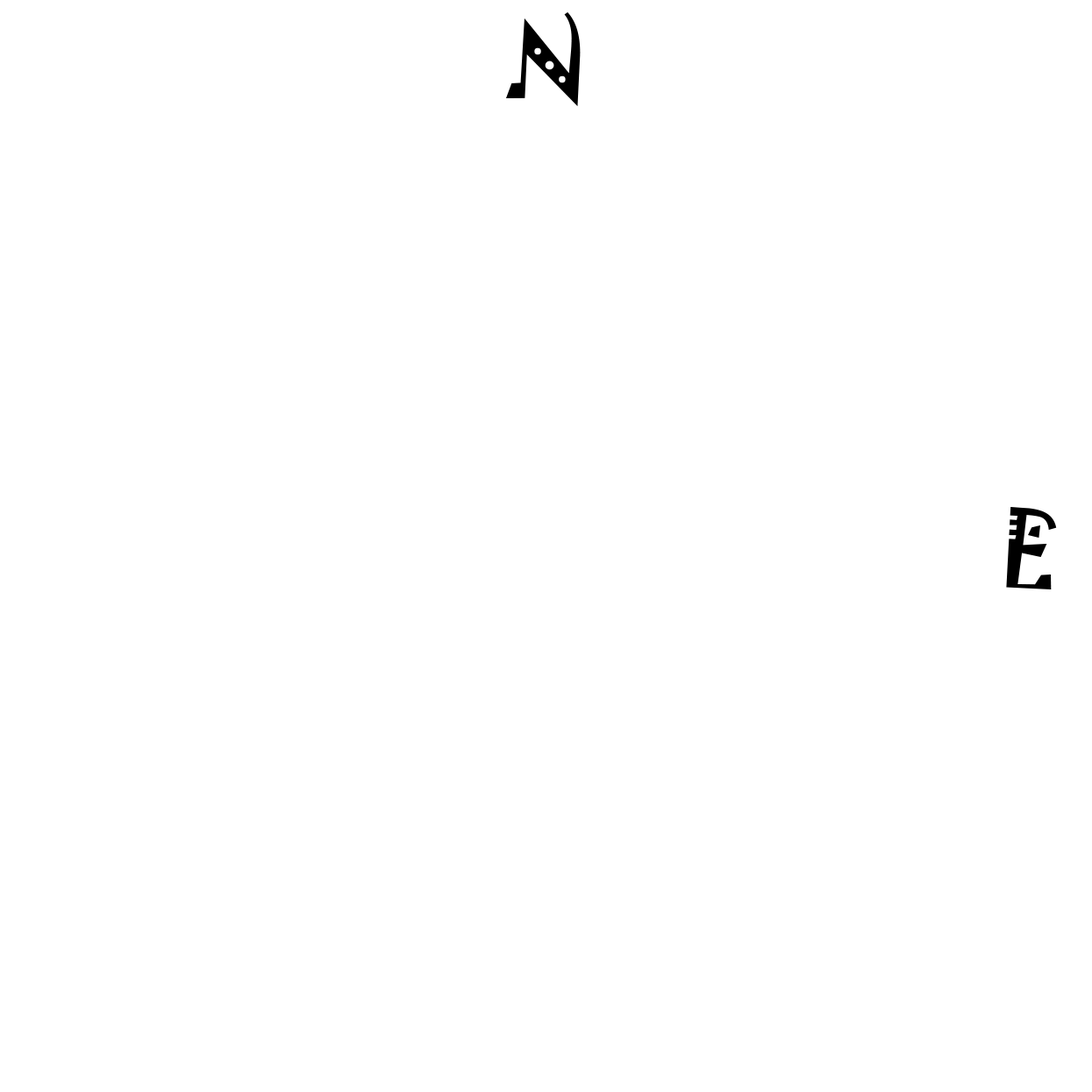
<style>
.page{position:relative;width:1092px;height:1092px;background:#ffffff}
.page>*{position:absolute;margin:0}
.t1{font:94.7px "Jokerman-Regular";color:#000000}
</style>
<div class="page">
<p class="t1" style="left:506px;top:12px;width:75px;height:94px">N</p>
<p class="t1" style="left:1006px;top:507px;width:51px;height:82px">E</p>
</div>
